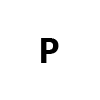
<style>
.page{position:relative;width:100px;height:100px;background:#ffffff}
.page>*{position:absolute;margin:0}
.t1{font:35px "OpenSans-Bold";color:#000000}
</style>
<div class="page">
<p class="t1" style="left:41px;top:38px;width:18px;height:25px">P</p>
</div>
